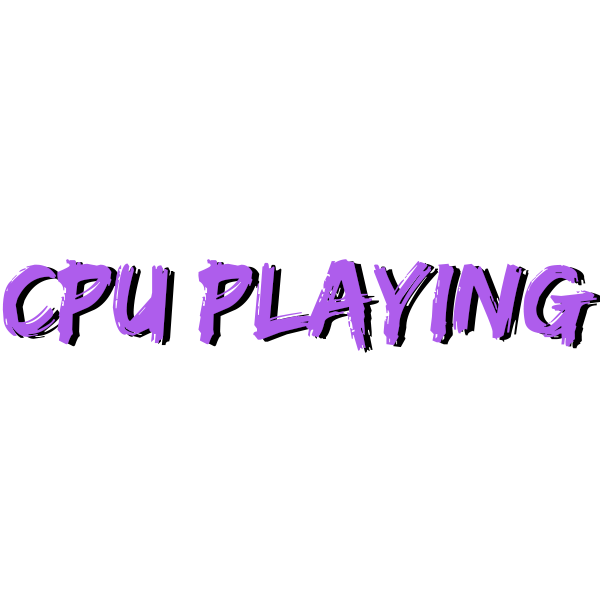
<style>
.page{position:relative;width:600px;height:600px;background:#ffffff}
.page>*{position:absolute;margin:0}
.t1{font:110px "EdoSZ";color:#ae5dec}
</style>
<div class="page">
<p class="t1" style="left:2px;top:259px;width:595px;height:92px">CPU Playing</p>
</div>
